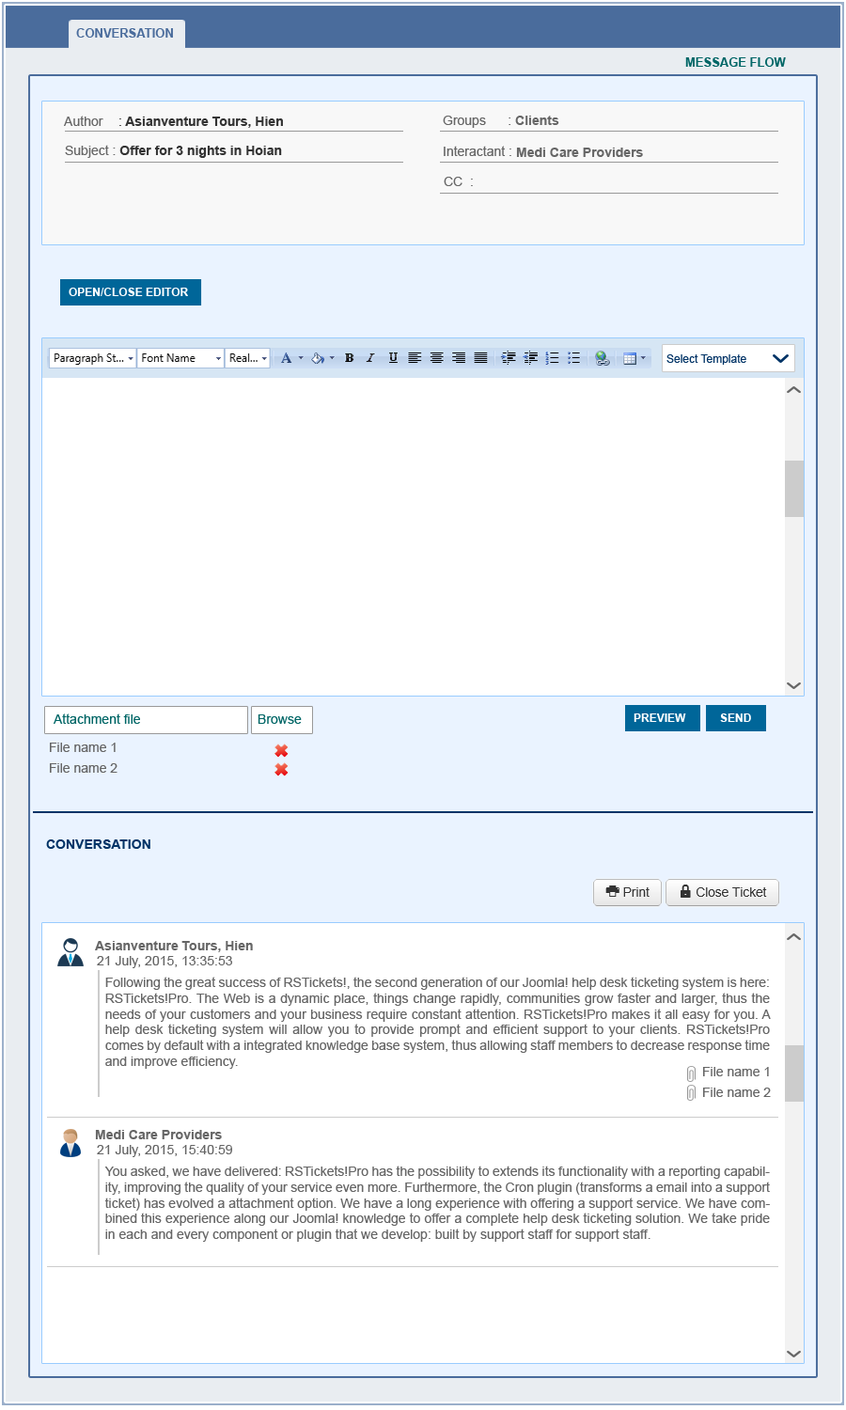
<style>
.page{position:relative;width:846px;height:1410px;background:#ffffff}
.page>*{position:absolute;margin:0}
.t1{font:12.2px "Arial-BoldMT";color:#4a6c9c}
.t2{font:12.2px "Arial-BoldMT";color:#006666}
.t3{font:13.2px "ArialMT";color:#666666}
.t4{font:13.2px "Arial-BoldMT";color:#333333}
.t5{font:13.2px "ArialMT";color:#333333}
.t6{font:13.2px "Arial-BoldMT";color:#666666}
.t7{font:11.3px "Arial-BoldMT";color:#ffffff}
.t8{font:11.3px "ArialMT";color:#003366}
.t9{font:13.2px "ArialMT";color:#006666}
.t10{font:13.2px/20.7px "ArialMT";color:#666666}
.t11{font:13.2px "Arial-BoldMT";color:#003366}
</style>
<div class="page">
<p class="t1" style="left:76px;top:28px;width:97px;height:10px">CONVERSATION</p>
<p class="t2" style="left:685px;top:57px;width:101px;height:10px">MESSAGE FLOW</p>
<p class="t3" style="left:64px;top:116px;width:39px;height:10px">Author</p>
<p class="t4" style="left:119px;top:117px;width:164px;height:11px"><span class="t5">:</span> Asianventure Tours, Hien</p>
<p class="t3" style="left:443px;top:116px;width:116px;height:12px">Groups      : <span class="t6">Clients</span></p>
<p class="t4" style="left:65px;top:145px;width:217px;height:13px"><span class="t3">Subject : </span>Offer for 3 nights in Hoian</p>
<p class="t3" style="left:444px;top:146px;width:67px;height:10px">Interactant :</p>
<p class="t6" style="left:516px;top:148px;width:127px;height:9px">Medi Care Providers</p>
<p class="t3" style="left:444px;top:177px;width:29px;height:9px">CC  :</p>
<p class="t7" style="left:69px;top:288px;width:119px;height:8px">OPEN/CLOSE EDITOR</p>
<p class="t8" style="left:666px;top:354px;width:80px;height:11px">Select Template</p>
<p class="t9" style="left:54px;top:713px;width:248px;height:11px">Attachment file                                Browse</p>
<p class="t7" style="left:633px;top:713px;width:118px;height:9px">PREVIEW           SEND</p>
<p class="t10" style="left:50px;top:742px;width:67px;height:31px;text-align:justify">File name 1<br>File name 2</p>
<p class="t11" style="left:46px;top:839px;width:104px;height:10px">CONVERSATION</p>
<p class="t6" style="left:95px;top:941px;width:158px;height:11px">Asianventure Tours, Hien</p>
<p class="t3" style="left:97px;top:956px;width:135px;height:12px">21 July, 2015, 13:35:53</p>
<p class="t3" style="left:105px;top:976px;width:666px;height:93px;text-align:justify">Following the great success of RSTickets!, the second generation of our Joomla! help desk ticketing system is here: RSTickets!Pro. The Web is a dynamic place, things change rapidly, communities grow faster and larger, thus the needs of your customers and your business require constant attention. RSTickets!Pro makes it all easy for you. A help desk ticketing system will allow you to provide prompt and efficient support to your clients. RSTickets!Pro comes by default with a integrated knowledge base system, thus allowing staff members to decrease response time and improve efficiency.</p>
<p class="t10" style="left:703px;top:1067px;width:68px;height:30px;text-align:justify">File name 1<br>File name 2</p>
<p class="t6" style="left:95px;top:1130px;width:127px;height:9px">Medi Care Providers</p>
<p class="t3" style="left:97px;top:1145px;width:135px;height:12px">21 July, 2015, 15:40:59</p>
<p class="t3" style="left:104px;top:1165px;width:666px;height:77px;text-align:justify">You asked, we have delivered: RSTickets!Pro has the possibility to extends its functionality with a reporting capability, improving the quality of your service even more. Furthermore, the Cron plugin (transforms a email into a support ticket) has evolved a attachment option. We have a long experience with offering a support service. We have combined this experience along our Joomla! knowledge to offer a complete help desk ticketing solution. We take pride in each and every component or plugin that we develop: built by support staff for support staff.</p>
</div>
